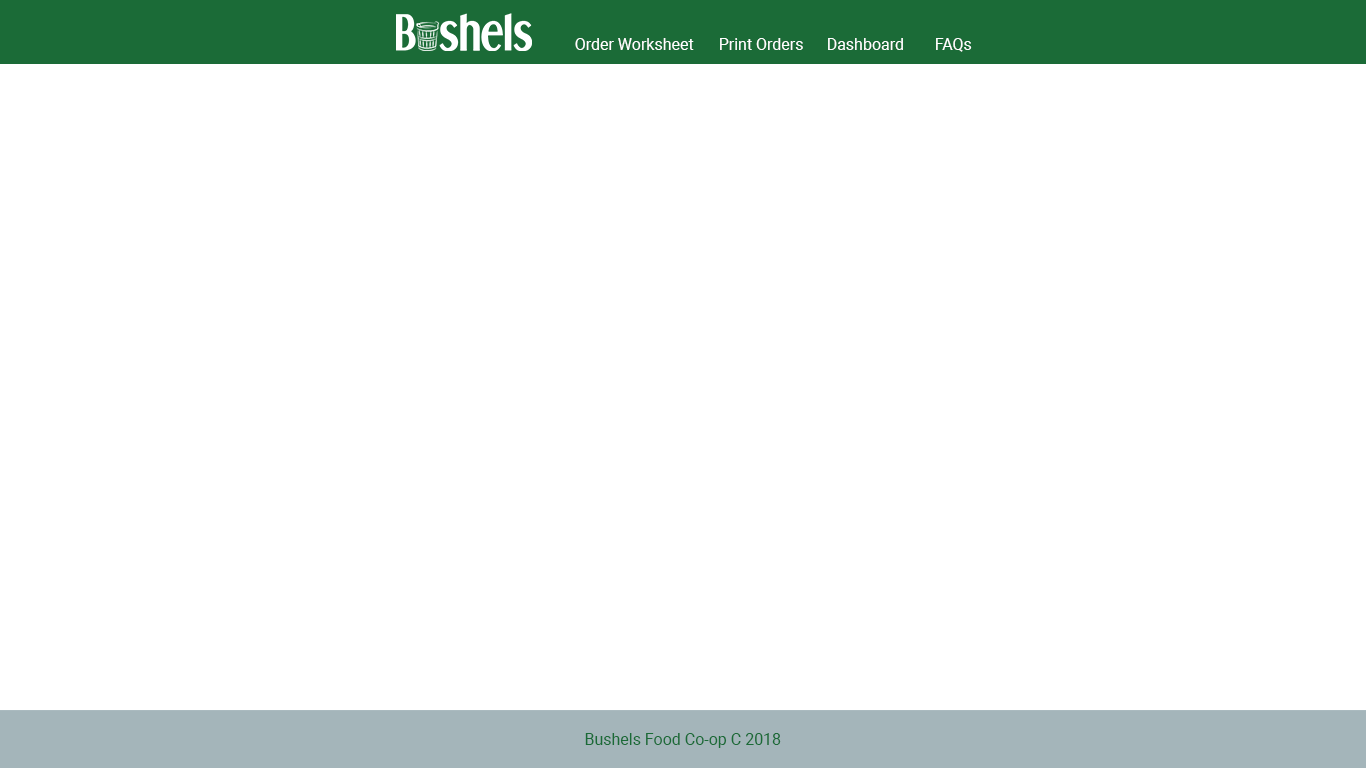
<style>
.page{position:relative;width:1366px;height:768px;background:#ffffff}
.page>*{position:absolute;margin:0}
.t1{font:16px "Roboto-Regular";color:#ffffff}
.t2{font:16px "Roboto-Regular";color:#1a6b37}
</style>
<div class="page">
<p class="t1" style="left:575px;top:38px;width:397px;height:14px">Order Worksheet Print Orders Dashboard FAQs</p>
<p class="t2" style="left:585px;top:733px;width:196px;height:15px">Bushels Food Co-op C 2018</p>
</div>
